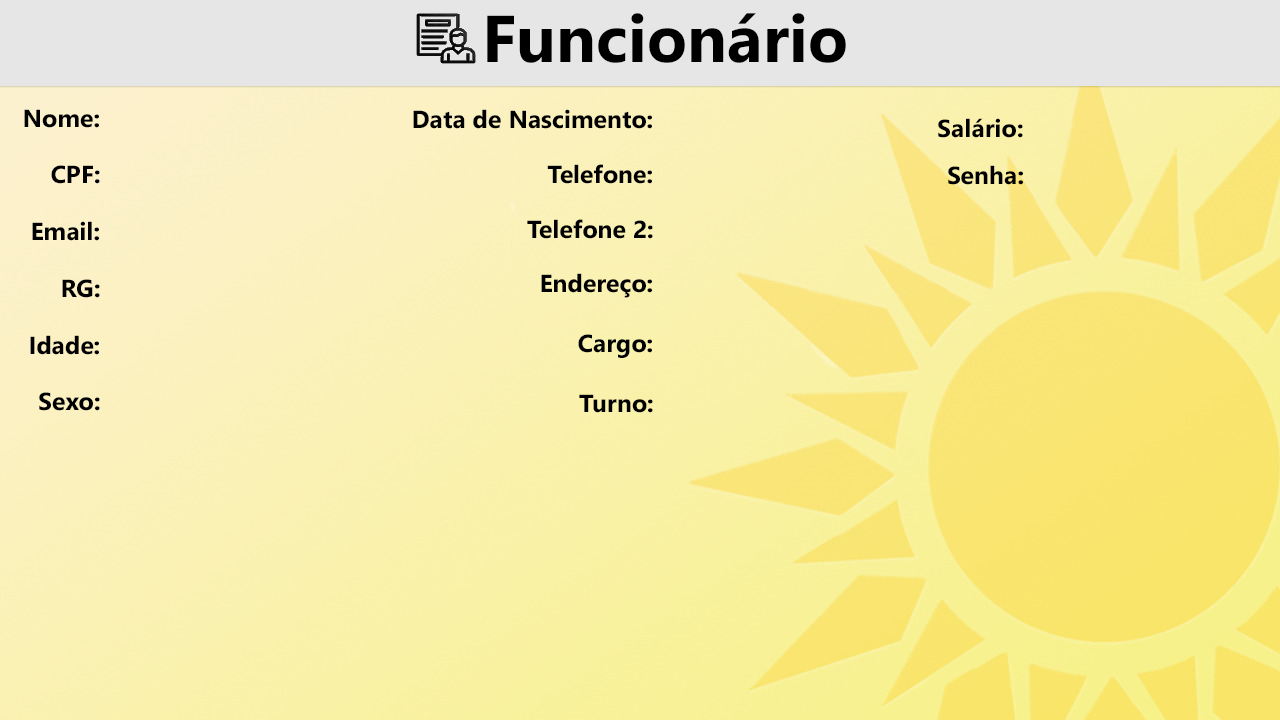
<style>
.page{position:relative;width:1280px;height:720px}
.page>*{position:absolute;margin:0}
.t1{font:66px "SegoeUI-Bold";color:#000000}
.t2{font:24.8px "SegoeUI-Bold";color:#000000}
</style>
<div class="page">
<p class="t1" style="left:487px;top:13px;width:359px;height:50px">Funcionário</p>
<p class="t2" style="left:24px;top:109px;width:75px;height:19px">Nome:</p>
<p class="t2" style="left:413px;top:109px;width:239px;height:20px">Data de Nascimento:</p>
<p class="t2" style="left:938px;top:118px;width:85px;height:20px">Salário:</p>
<p class="t2" style="left:51px;top:165px;width:49px;height:19px">CPF:</p>
<p class="t2" style="left:547px;top:164px;width:105px;height:20px">Telefone:</p>
<p class="t2" style="left:948px;top:165px;width:75px;height:20px">Senha:</p>
<p class="t2" style="left:32px;top:221px;width:67px;height:20px">Email:</p>
<p class="t2" style="left:527px;top:219px;width:126px;height:20px">Telefone 2:</p>
<p class="t2" style="left:62px;top:279px;width:38px;height:19px">RG:</p>
<p class="t2" style="left:541px;top:273px;width:111px;height:25px">Endereço:</p>
<p class="t2" style="left:30px;top:335px;width:69px;height:20px">Idade:</p>
<p class="t2" style="left:578px;top:334px;width:74px;height:24px">Cargo:</p>
<p class="t2" style="left:39px;top:392px;width:61px;height:19px">Sexo:</p>
<p class="t2" style="left:579px;top:394px;width:74px;height:19px">Turno:</p>
</div>
